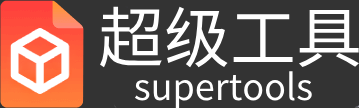
<style>
.page{position:relative;width:359px;height:108px;background:#333333}
.page>*{position:absolute;margin:0}
.t1{font:66px "SourceHanSansSC-Regular";color:#ffffff}
.t2{font:36px "SourceHanSansSC-Regular";color:#ffffff}
</style>
<div class="page">
<p class="t1" style="left:100px;top:6px;width:259px;height:62px">超级工具</p>
<p class="t2" style="left:134px;top:71px;width:178px;height:38px">supertools</p>
</div>
